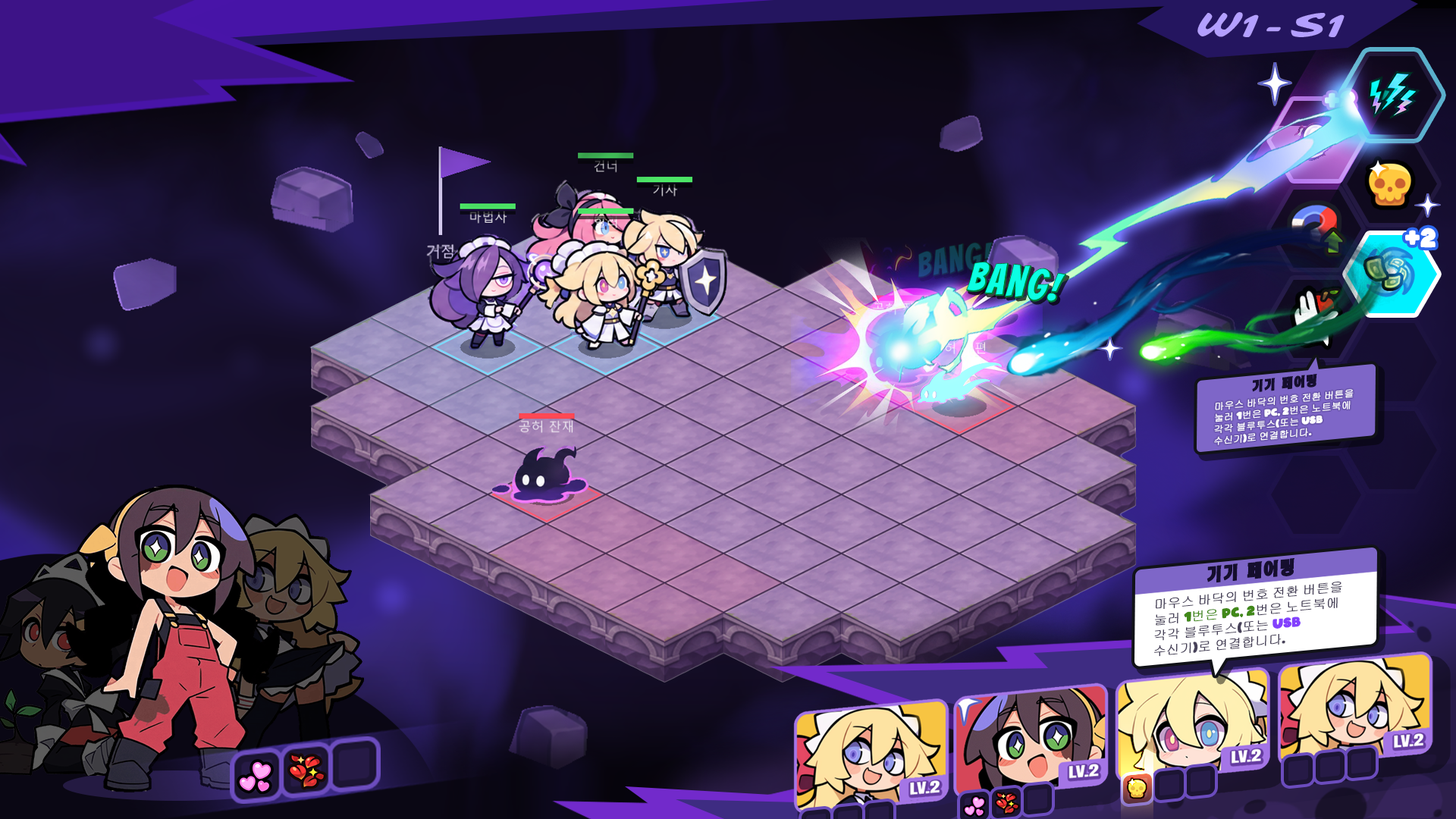
<style>
.page{position:relative;width:1456px;height:819px}
.page>*{position:absolute;margin:0}
.t1{font:35.5px "Sarina-Regular";letter-spacing:0.03em;color:#b39fff}
.t2{font:25.3px "ARCO";font-weight:bold}
.t3{font:25.3px "ARCO";color:#ffffff;font-weight:bold}
.t4{font:14.5px "YoonMeolippichim-Bold";color:#150e2e;font-weight:bold}
.t5{font:9.6px "Gulim";color:#ffffff;font-weight:bold}
.t6{font:9.6px "ARCO";color:#ffffff;font-weight:bold}
.t7{font:19.6px "YoonMeolippichim-Bold";color:#150e2e;font-weight:bold}
.t8{font:13px "Gulim";color:#48425a;font-weight:bold}
.t9{font:13px "ARCO";color:#418919;font-weight:bold}
.t10{font:13px "Gulim";color:#418919;font-weight:bold}
.t11{font:13px "ARCO";color:#48425a;font-weight:bold}
.t12{font:13px "ARCO";color:#8340fd;font-weight:bold}
</style>
<div class="page">
<p class="t1" style="left:1197px;top:12px;width:148px;height:25px">W1-S1</p>
<p class="t2" style="left:1325px;top:90px;width:30px;height:21px">+2</p>
<p class="t3" style="left:1405px;top:227px;width:31px;height:21px">+2</p>
<p class="t4" style="left:1252px;top:374px;width:65px;height:18px;rotate:-6deg">기기 페어링</p>
<p class="t5" style="left:1214px;top:389px;width:140px;height:56px;rotate:-6deg">마우스 바닥의 번호 전환 버튼을 눌러<span class="t6"> 1</span>번은<span class="t6"> PC, 2</span>번은 노트북에 각각 블루투스<span class="t6">(</span>또는<span class="t6"> USB </span>수신기<span class="t6">)</span>로 연결합니다<span class="t6">.</span></p>
<p class="t7" style="left:1206px;top:558px;width:88px;height:25px;rotate:-6deg">기기 페어링</p>
<p class="t8" style="left:1154px;top:582px;width:188px;height:75px;rotate:-6deg">마우스 바닥의 번호 전환 버튼을 눌러 <span class="t9">1</span><span class="t10">번은</span><span class="t9"> PC, 2</span>번은 노트북에 각각 블루투스<span class="t11">(</span>또는 <span class="t12">USB </span>수신기<span class="t11">)</span>로 연결합니다<span class="t11">.</span></p>
</div>
